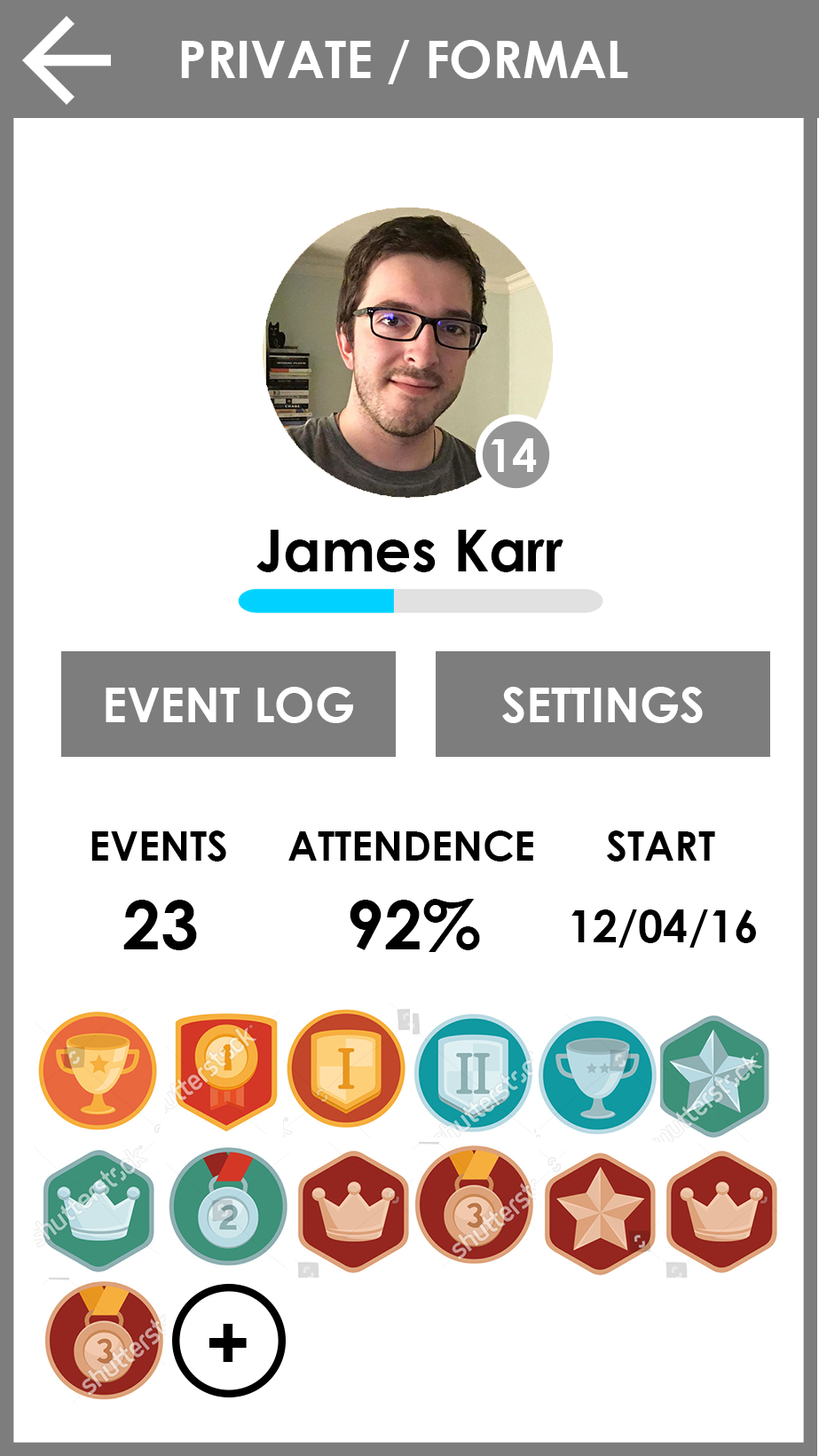
<style>
.page{position:relative;width:819px;height:1456px;background:#ffffff}
.page>*{position:absolute;margin:0}
.t1{font:51.3px "CenturyGothic-Bold";color:#ffffff}
.t2{font:45.1px "CenturyGothic-Bold";color:#ffffff}
.t3{font:57.5px "CenturyGothic-Bold";color:#000000}
.t4{font:47.6px "CenturyGothic-Bold";color:#ffffff}
.t5{font:40.6px "CenturyGothic-Bold";color:#000000}
.t6{font:68.1px "CenturyGothic-Bold";color:#000000}
.t7{font:44.5px "CenturyGothic-Bold";color:#000000}
.t8{font:76.1px "CenturyGothic-Bold";color:#000000}
</style>
<div class="page">
<p class="t1" style="left:181px;top:40px;width:447px;height:44px">PRIVATE / FORMAL</p>
<p class="t2" style="left:491px;top:438px;width:46px;height:34px">14</p>
<p class="t3" style="left:256px;top:530px;width:307px;height:42px">James Karr</p>
<p class="t4" style="left:106px;top:687px;width:247px;height:36px">EVENT LOG</p>
<p class="t4" style="left:502px;top:687px;width:201px;height:36px">SETTINGS</p>
<p class="t5" style="left:91px;top:830px;width:135px;height:32px">EVENTS</p>
<p class="t5" style="left:288px;top:830px;width:245px;height:32px">ATTENDENCE</p>
<p class="t5" style="left:607px;top:830px;width:108px;height:32px">START</p>
<p class="t6" style="left:123px;top:900px;width:74px;height:50px">23</p>
<p class="t6" style="left:350px;top:899px;width:130px;height:53px">92%</p>
<p class="t7" style="left:571px;top:909px;width:185px;height:39px">12/04/16</p>
<p class="t8" style="left:209px;top:1324px;width:38px;height:38px">+</p>
</div>
